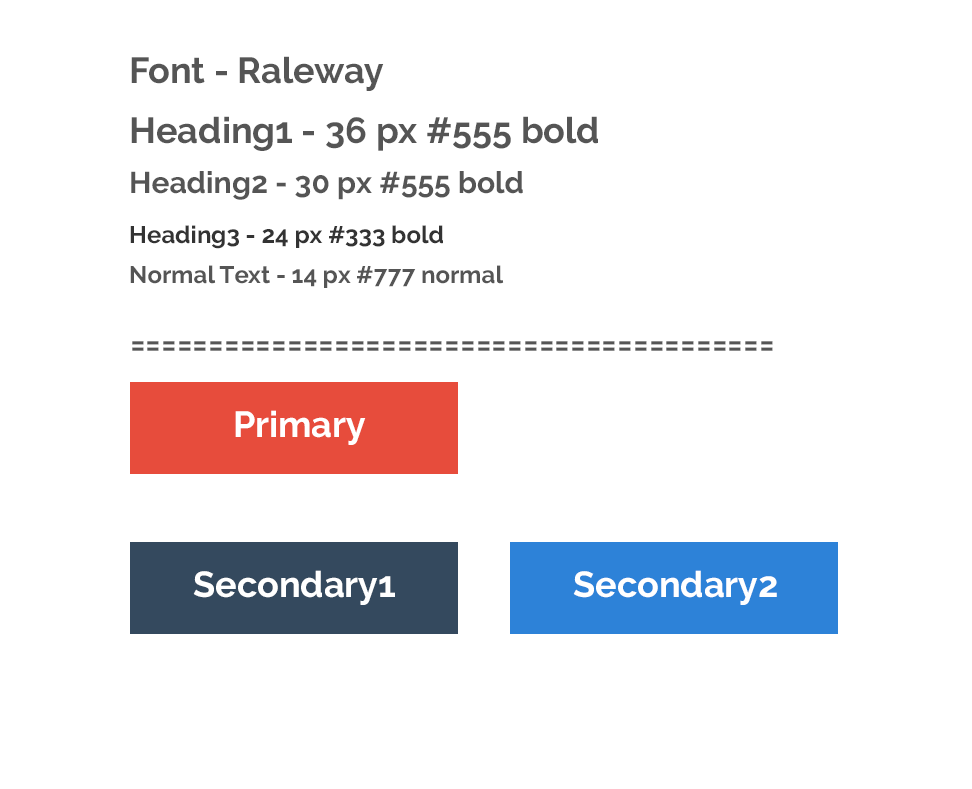
<style>
.page{position:relative;width:972px;height:789px;background:#ffffff}
.page>*{position:absolute;margin:0}
.t1{font:36px "Raleway-Bold";color:#555555}
.t2{font:30px "Raleway-Bold";color:#555555}
.t3{font:24px "Raleway-Bold";color:#333333}
.t4{font:24px "Raleway-Bold";color:#555555}
.t5{font:36px "Raleway-Bold";color:#ffffff}
</style>
<div class="page">
<p class="t1" style="left:131px;top:56px;width:253px;height:35px">Font - Raleway</p>
<p class="t1" style="left:131px;top:116px;width:467px;height:35px">Heading1 - 36 px #555 bold</p>
<p class="t2" style="left:131px;top:171px;width:392px;height:29px">Heading2 - 30 px #555 bold</p>
<p class="t3" style="left:130px;top:225px;width:313px;height:24px">Heading3 - 24 px #333 bold</p>
<p class="t4" style="left:130px;top:265px;width:374px;height:23px">Normal Text - 14 px #777 normal</p>
<p class="t1" style="left:132px;top:341px;width:641px;height:10px">=========================================</p>
<p class="t5" style="left:235px;top:410px;width:131px;height:35px">Primary</p>
<p class="t5" style="left:193px;top:570px;width:202px;height:35px">Secondary1</p>
<p class="t5" style="left:573px;top:570px;width:204px;height:35px">Secondary2</p>
</div>
